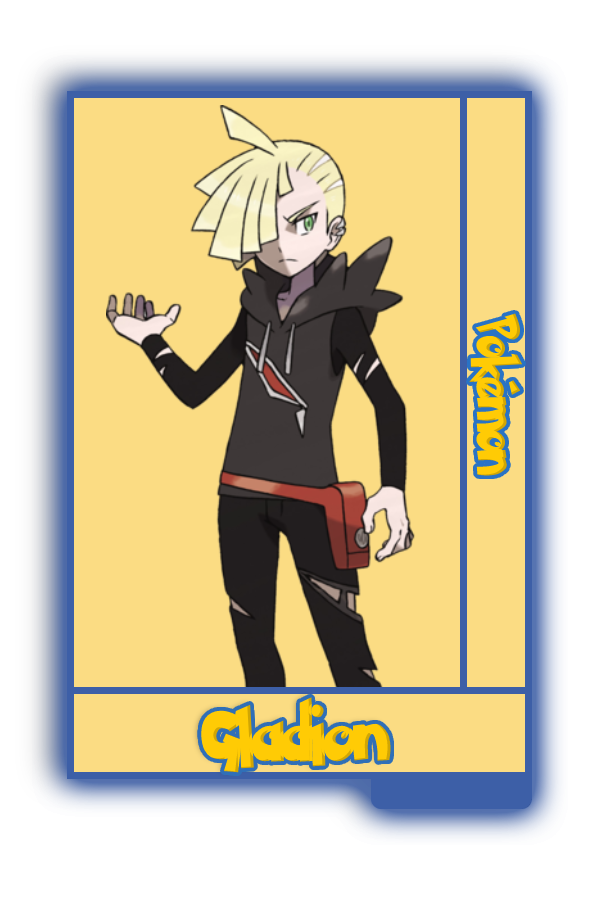
<style>
.page{position:relative;width:600px;height:900px;background:#fbdc83}
.page>*{position:absolute;margin:0}
.t1{font:48.8px "PokemonSolidNormal";color:#ffcb05;scale:0.8 1}
.t2{font:60.1px "PokemonSolidNormal";color:#ffcb05;scale:0.96 1}
</style>
<div class="page">
<p class="t1" style="left:469px;top:313px;width:54px;height:163px;rotate:90deg">Pokémon</p>
<p class="t2" style="left:201px;top:697px;width:190px;height:76px">Gladion</p>
</div>
